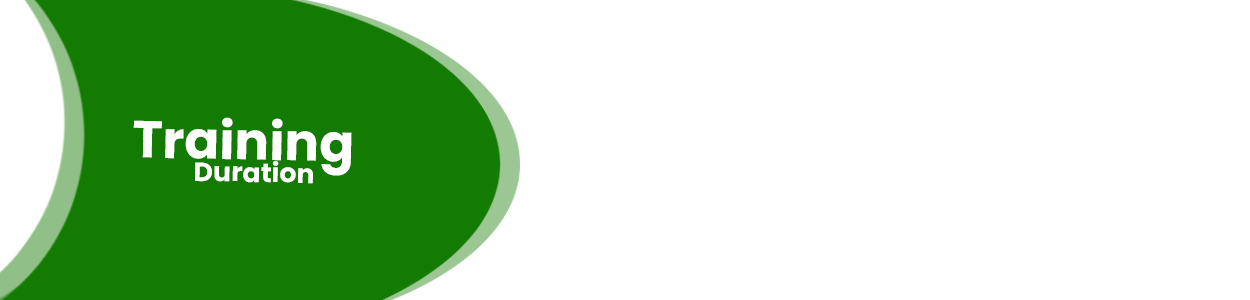
<style>
.page{position:relative;width:1250px;height:300px;background:#ffffff}
.page>*{position:absolute;margin:0}
.t1{font:51.8px "Poppins-Bold";color:#ffffff}
.t2{font:26.5px "Poppins-Bold";color:#ffffff}
</style>
<div class="page">
<p class="t1" style="left:133px;top:117px;width:219px;height:59px;rotate:1deg">Training</p>
<p class="t2" style="left:195px;top:161px;width:118px;height:23px;rotate:1deg">Duration</p>
</div>
